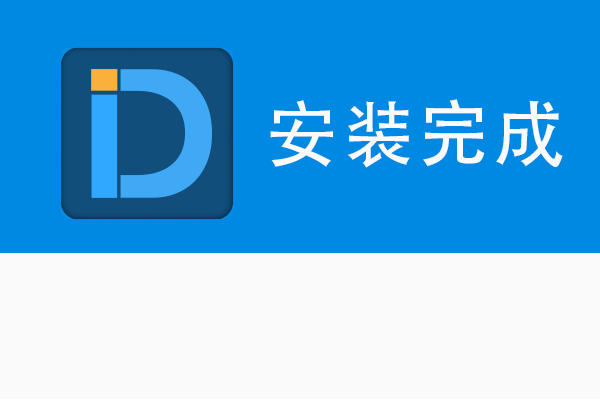
<style>
.page{position:relative;width:600px;height:400px;background:#0089e2}
.page>*{position:absolute;margin:0}
.t1{font:72px "AdobeHeitiStd-Regular";letter-spacing:0.052em;color:#fafafa}
</style>
<div class="page">
<p class="t1" style="left:270px;top:99px;width:293px;height:69px">安装完成</p>
</div>
